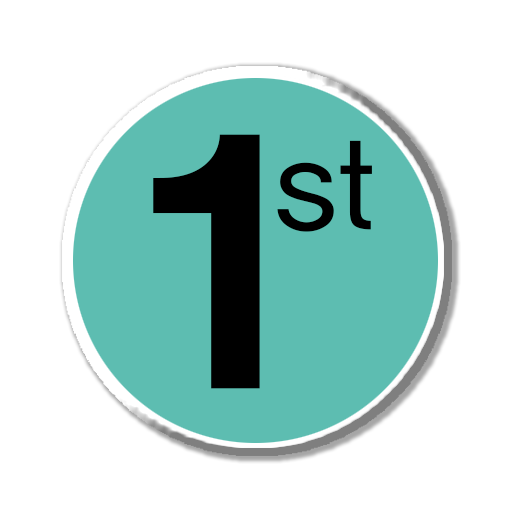
<style>
.page{position:relative;width:512px;height:512px;background:#ffffff}
.page>*{position:absolute;margin:0}
.t1{font:331.3px "H2gtrE";color:#000000}
.t2{font:116.2px "KoreanYGD-M";color:#000000}
</style>
<div class="page">
<p class="t1" style="left:153px;top:134px;width:107px;height:255px">1</p>
<p class="t2" style="left:277px;top:140px;width:95px;height:92px">st</p>
</div>
